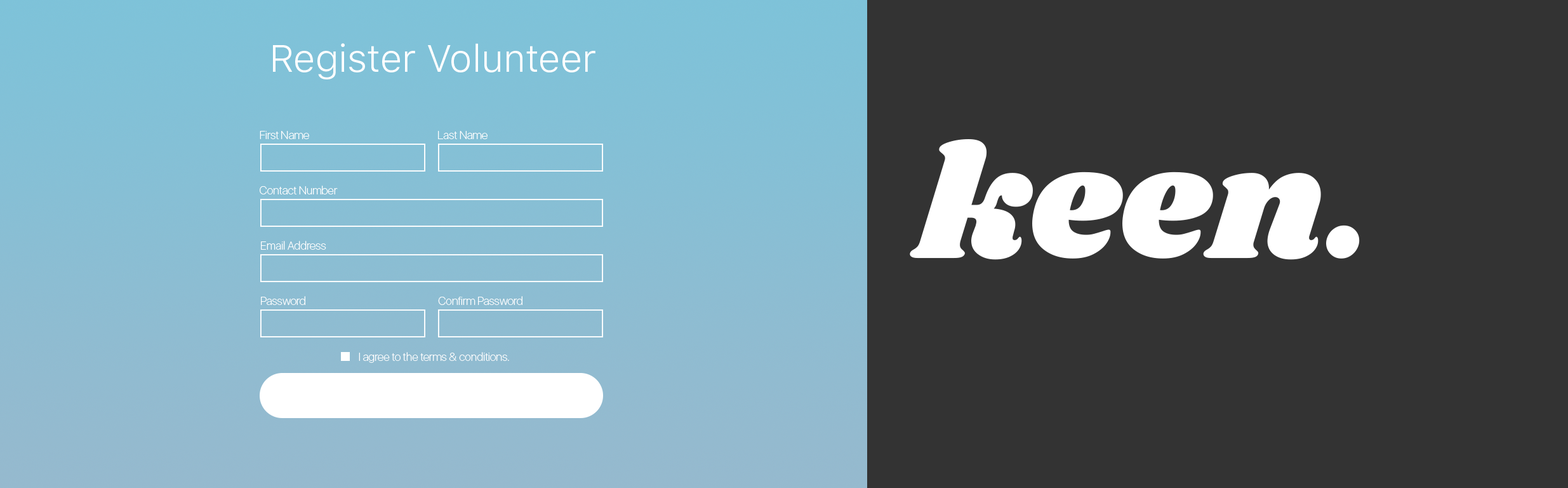
<style>
.page{position:relative;width:1568px;height:488px;background:#333333}
.page>*{position:absolute;margin:0}
.t1{font:38.1px "SFUIText-Light";color:#ffffff}
.t2{font:11.4px "SFUIDisplay-Thin";color:#ffffff}
</style>
<div class="page">
<p class="t1" style="left:273px;top:43px;width:322px;height:36px">Register Volunteer</p>
<p class="t2" style="left:260px;top:131px;width:49px;height:8px">First Name</p>
<p class="t2" style="left:438px;top:131px;width:50px;height:8px">Last Name</p>
<p class="t2" style="left:260px;top:185px;width:78px;height:9px">Contact Number</p>
<p class="t2" style="left:261px;top:241px;width:65px;height:8px">Email Address</p>
<p class="t2" style="left:261px;top:296px;width:44px;height:9px">Password</p>
<p class="t2" style="left:438px;top:296px;width:84px;height:9px">Confirm Password</p>
<p class="t2" style="left:359px;top:352px;width:150px;height:10px">I agree to the terms &amp; conditions.</p>
</div>
